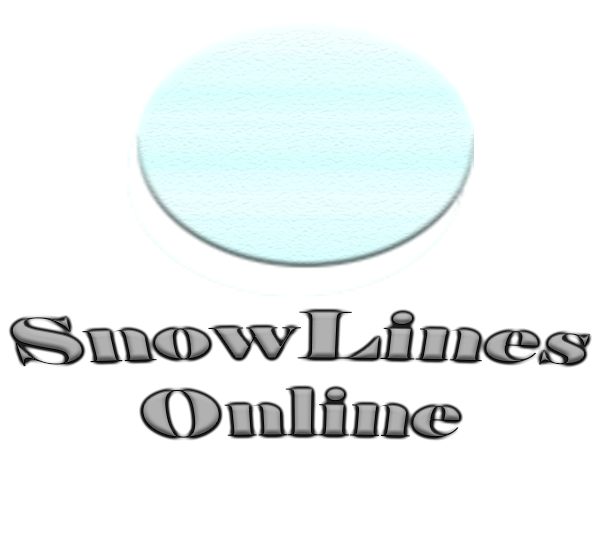
<style>
.page{position:relative;width:600px;height:540px;background:#ffffff}
.page>*{position:absolute;margin:0}
.t1{font:61.7px "Elephant-Regular"}
</style>
<div class="page">
<p class="t1" style="left:11px;top:311px;width:579px;height:127px;text-align:center">SnowLines Online</p>
</div>
